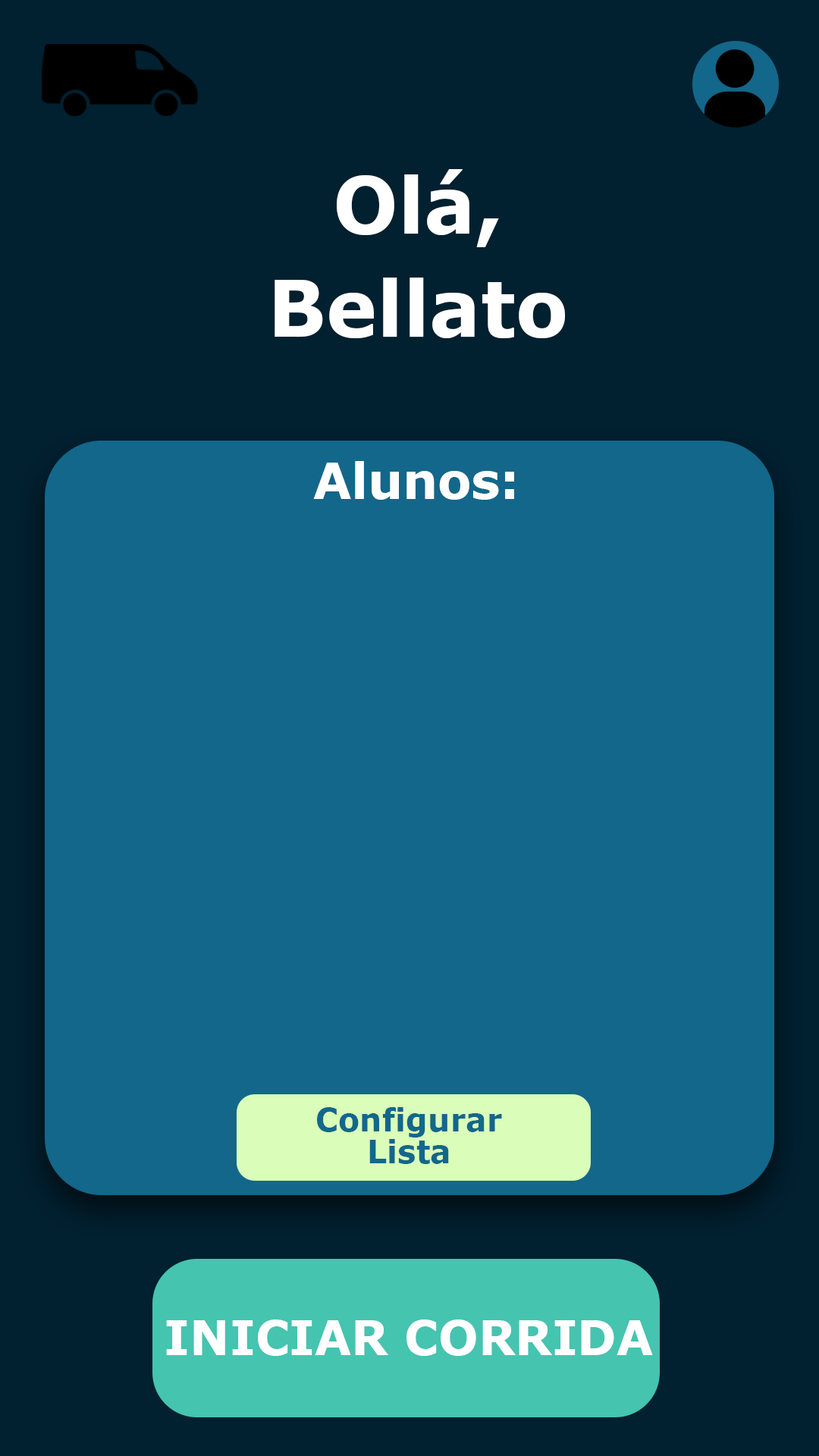
<style>
.page{position:relative;width:819px;height:1456px;background:#13678a}
.page>*{position:absolute;margin:0}
.t1{font:77.7px/102.8px "Verdana-Bold";color:#ffffff}
.t2{font:49.7px "Verdana-Bold";color:#ffffff}
.t3{font:31.8px/31.6px "Verdana-Bold";color:#13678a}
.t4{font:47.8px "Verdana-Bold";color:#ffffff}
</style>
<div class="page">
<p class="t1" style="left:275px;top:169px;width:291px;height:169px;text-align:center">Olá,<br>Bellato</p>
<p class="t2" style="left:313px;top:461px;width:201px;height:39px">Alunos:</p>
<p class="t3" style="left:317px;top:1107px;width:185px;height:57px;text-align:center">Configurar<br>Lista</p>
<p class="t4" style="left:166px;top:1319px;width:487px;height:37px">INICIAR CORRIDA</p>
</div>
